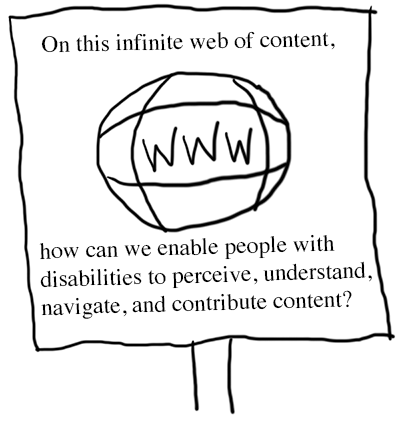
<style>
.page{position:relative;width:400px;height:423px;background:#ffffff}
.page>*{position:absolute;margin:0}
.t1{font:23.4px "Times-Roman";color:#000000}
</style>
<div class="page">
<p class="t1" style="left:41px;top:31px;width:294px;height:22px;rotate:-1deg">On this infinite web of content,</p>
<p class="t1" style="left:39px;top:234px;width:333px;height:85px;rotate:-2deg">how can we enable people with<br>disabilities to perceive, understand,<br>navigate, and contribute content?</p>
</div>
